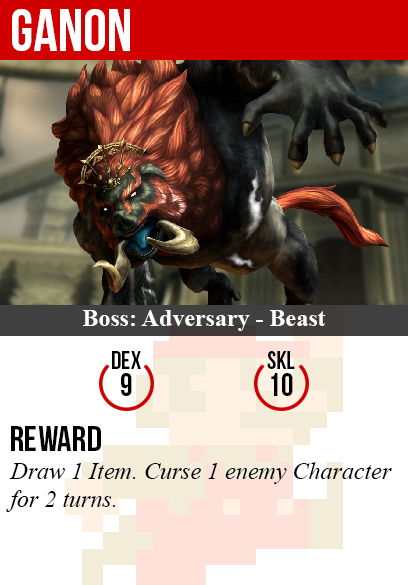
<style>
.page{position:relative;width:408px;height:585px;background:#ffffff}
.page>*{position:absolute;margin:0}
.t1{font:60px "BebasNeue";color:#ffffff}
.t2{font:24px "TimesNewRomanPS-BoldMT";color:#ffffff}
.t3{font:25px "BebasNeue";color:#000000}
.t4{font:32px "BebasNeue";color:#000000}
.t5{font:36px "BebasNeue";color:#000000}
.t6{font:24px "TimesNewRomanPS-ItalicMT";color:#000000}
</style>
<div class="page">
<p class="t1" style="left:12px;top:9px;width:118px;height:42px">ganon</p>
<p class="t2" style="left:83px;top:310px;width:243px;height:21px">Boss: Adversary - Beast</p>
<p class="t3" style="left:112px;top:351px;width:29px;height:18px">dex</p>
<p class="t3" style="left:267px;top:351px;width:28px;height:18px">skl</p>
<p class="t4" style="left:121px;top:373px;width:11px;height:23px">9</p>
<p class="t4" style="left:271px;top:373px;width:22px;height:23px">10</p>
<p class="t5" style="left:11px;top:426px;width:90px;height:25px">reward</p>
<p class="t6" style="left:6px;top:462px;width:386px;height:50px">Draw 1 Item. Curse 1 enemy Character<br>for 2 turns.</p>
</div>
